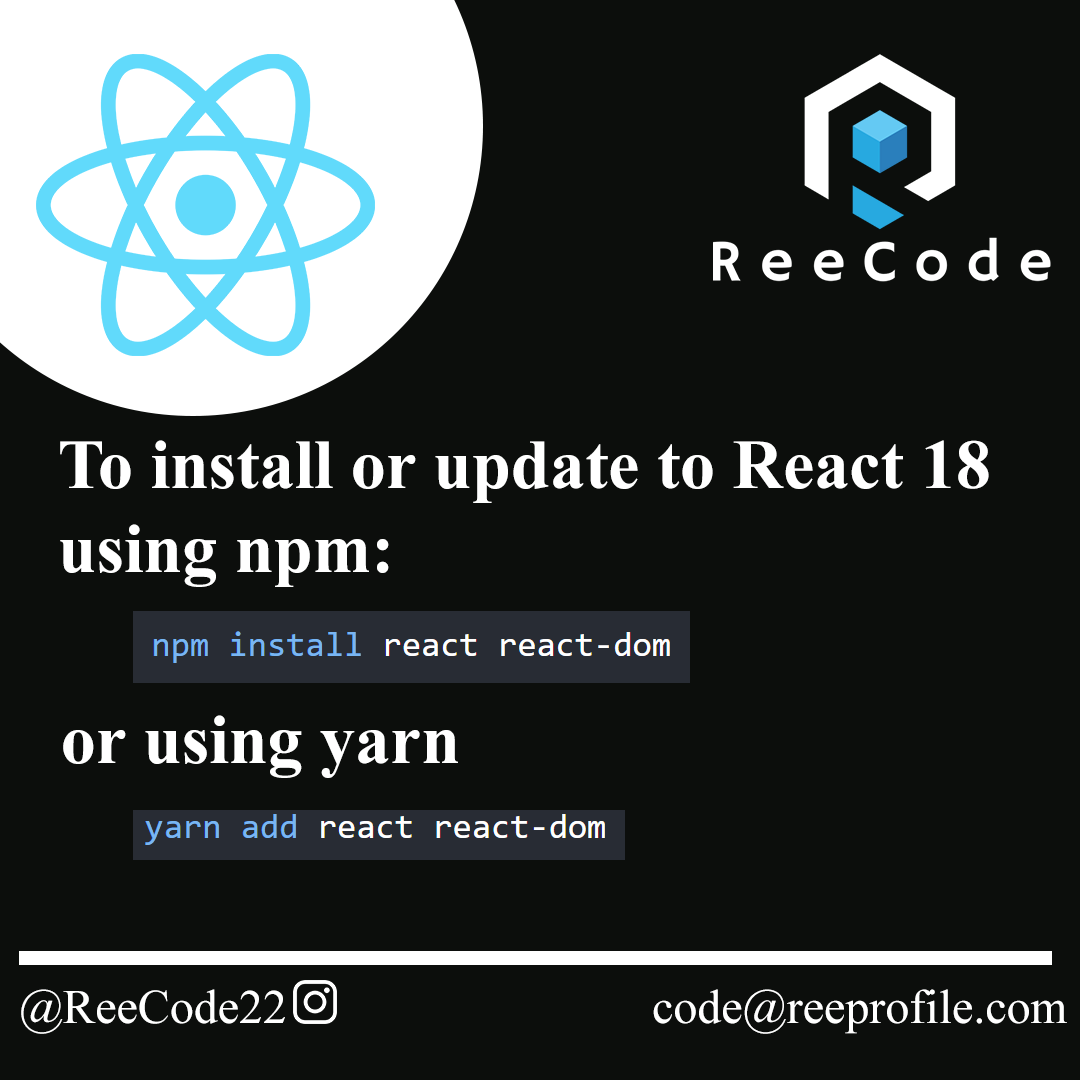
<style>
.page{position:relative;width:1080px;height:1080px;background:#0c0e0c}
.page>*{position:absolute;margin:0}
.t1{font:70px "TimesNewRomanPS-BoldMT";color:#ffffff}
.t2{font:48px "TimesNewRomanPSMT";color:#ffffff}
</style>
<div class="page">
<p class="t1" style="left:60px;top:440px;width:929px;height:147px">To install or update to React 18<br>using npm:</p>
<p class="t1" style="left:63px;top:715px;width:395px;height:63px">or using yarn</p>
<p class="t2" style="left:21px;top:989px;width:264px;height:45px">@ReeCode22</p>
<p class="t2" style="left:653px;top:989px;width:414px;height:45px">code@reeprofile.com</p>
</div>
